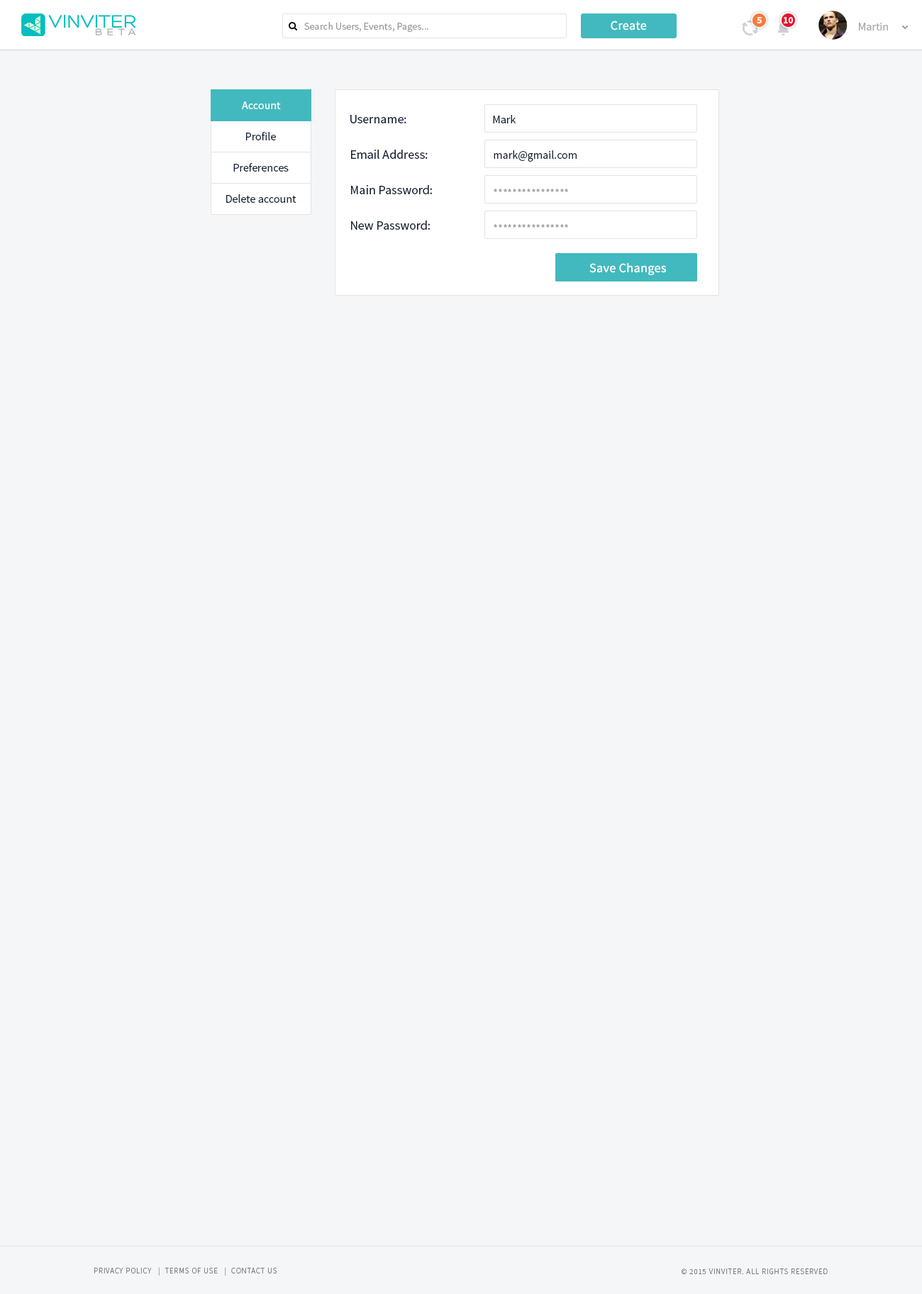
<style>
.page{position:relative;width:922px;height:1294px;background:#f5f6f7}
.page>*{position:absolute;margin:0}
.t1{font:9.2px "SourceSansPro-Bold";color:#ffffff}
.t2{font:10.2px "SourceSansPro-Regular";color:#999999}
.t3{font:12.8px "SourceSansPro-Regular";letter-spacing:0.02em;color:#ffffff}
.t4{font:11.3px "SourceSansPro-Regular";color:#a3a6ae}
.t5{font:11.3px "SourceSansPro-Regular";color:#ffffff}
.t6{font:12.8px "SourceSansPro-Regular";color:#162136}
.t7{font:11.3px "SourceSansPro-Regular";color:#162136}
.t8{font:11.3px "SourceSansPro-Regular";color:#999999}
.t9{font:7.8px "SourceSansPro-Light";letter-spacing:0.075em;color:#747a85;text-transform:uppercase}
</style>
<div class="page">
<p class="t1" style="left:756px;top:17px;width:5px;height:6px">5</p>
<p class="t1" style="left:783px;top:17px;width:10px;height:6px">10</p>
<p class="t2" style="left:304px;top:22px;width:124px;height:11px">Search Users, Events, Pages...</p>
<p class="t3" style="left:610px;top:21px;width:37px;height:9px">Create</p>
<p class="t4" style="left:859px;top:23px;width:29px;height:7px">Martin</p>
<p class="t5" style="left:242px;top:101px;width:39px;height:8px">Account</p>
<p class="t6" style="left:350px;top:115px;width:56px;height:8px">Username:</p>
<p class="t7" style="left:493px;top:115px;width:22px;height:8px">Mark</p>
<p class="t7" style="left:246px;top:132px;width:30px;height:8px">Profile</p>
<p class="t6" style="left:351px;top:150px;width:76px;height:9px">Email Address:</p>
<p class="t7" style="left:493px;top:150px;width:83px;height:12px">mark@gmail.com</p>
<p class="t7" style="left:233px;top:163px;width:56px;height:9px">Preferences</p>
<p class="t6" style="left:351px;top:185px;width:81px;height:9px">Main Password:</p>
<p class="t7" style="left:226px;top:194px;width:70px;height:9px">Delete account</p>
<p class="t8" style="left:493px;top:189px;width:75px;height:3px">****************</p>
<p class="t6" style="left:351px;top:220px;width:79px;height:10px">New Password:</p>
<p class="t8" style="left:493px;top:224px;width:75px;height:4px">****************</p>
<p class="t3" style="left:589px;top:263px;width:77px;height:12px">Save Changes</p>
<p class="t9" style="left:94px;top:1267px;width:183px;height:8px">Privacy Policy   |  Terms of Use   |  Contact us</p>
<p class="t9" style="left:681px;top:1268px;width:146px;height:6px">© 2015 VINVITER. All rights reserved</p>
</div>
